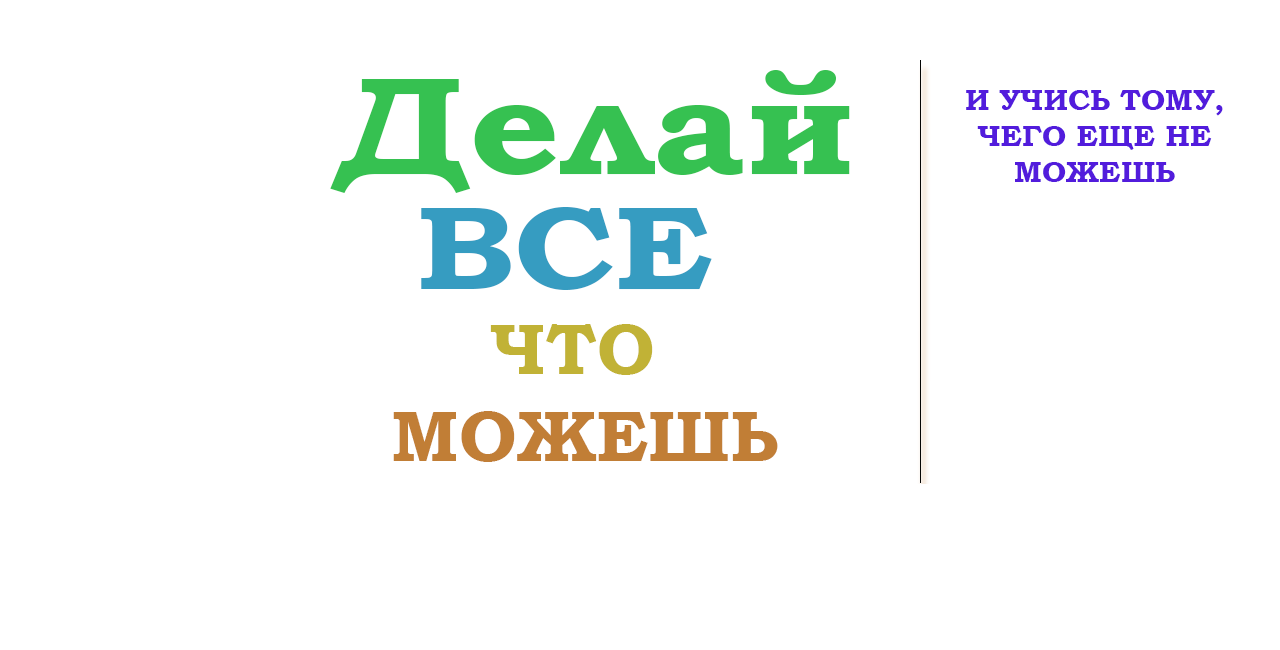
<style>
.page{position:relative;width:1280px;height:650px;background:#ffffff}
.page>*{position:absolute;margin:0}
.t1{font:139.1px "BookmanOldStyle-Bold";color:#36c151;scale:1.14 1}
.t2{font:30px "BookmanOldStyle-Bold";color:#521cdc}
.t3{font:119px "BookmanOldStyle-Bold";color:#369cc1;scale:1.14 1}
.t4{font:72px "BookmanOldStyle-Bold";color:#c1b236}
.t5{font:72px "BookmanOldStyle-Bold";color:#c17e36}
</style>
<div class="page">
<p class="t1" style="left:330px;top:70px;width:520px;height:123px">Делай</p>
<p class="t2" style="left:966px;top:90px;width:257px;height:92px;text-align:center">И УЧИСЬ ТОМУ,<br>ЧЕГО ЕЩЕ НЕ МОЖЕШЬ</p>
<p class="t3" style="left:421px;top:207px;width:291px;height:83px">ВСЕ</p>
<p class="t4" style="left:490px;top:324px;width:163px;height:51px">ЧТО</p>
<p class="t5" style="left:393px;top:411px;width:385px;height:51px">МОЖЕШЬ</p>
</div>
